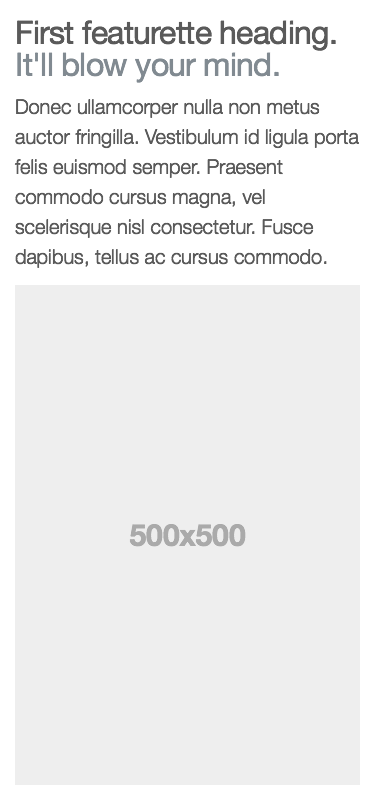
<style>
.page{position:relative;width:375px;height:800px;background:#eeeeee}
.page>*{position:absolute;margin:0}
.t1{font:20px/30px "MyriadPro-Regular";color:#5a5a5a}
.t2{font:12px "MyriadPro-Regular";color:#000000}
.t3{font:12px "MyriadPro-Regular";color:#818a91}
.t4{font:30px "HelveticaNeue-Bold";color:#aaaaaa}
</style>
<div class="page">
<p class="t1" style="left:14px;top:20px;width:345px;height:248px"><span class="t2">First featurette heading. </span><span class="t3">It'll blow your mind.<br></span>Donec ullamcorper nulla non metus auctor fringilla. Vestibulum id ligula porta felis euismod semper. Praesent commodo cursus magna, vel scelerisque nisl consectetur. Fusce dapibus, tellus ac cursus commodo.</p>
<p class="t4" style="left:129px;top:524px;width:117px;height:23px">500x500</p>
</div>
